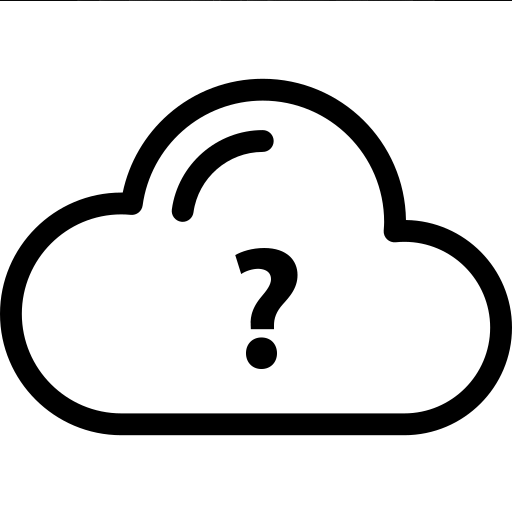
<style>
.page{position:relative;width:512px;height:512px;background:#ffffff}
.page>*{position:absolute;margin:0}
.t1{font:173.3px "MyriadPro-Bold";color:#000000}
</style>
<div class="page">
<p class="t1" style="left:235px;top:247px;width:63px;height:121px">?</p>
</div>
